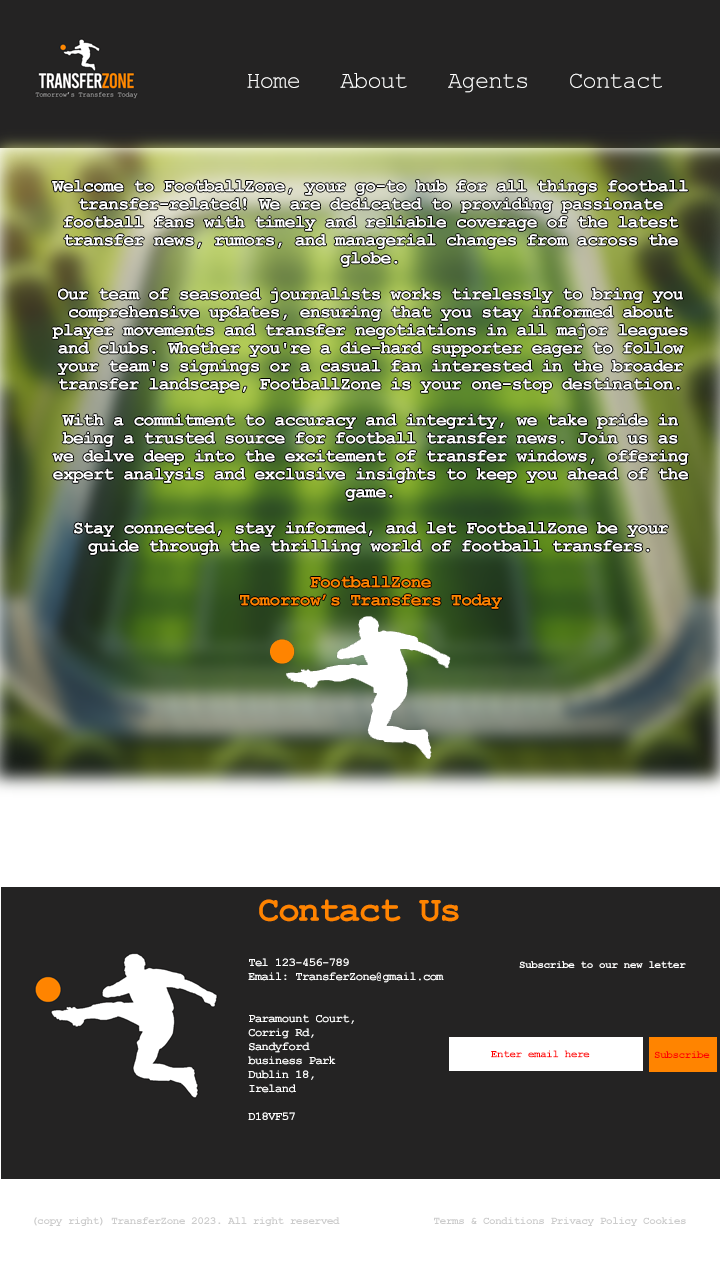
<style>
.page{position:relative;width:720px;height:1280px;background:#242323}
.page>*{position:absolute;margin:0}
.t1{font:18px/18px "CourierNewPS-BoldMT";letter-spacing:-0.04em;color:#ffffff}
.t2{font:18px/18px "CourierNewPS-BoldMT";letter-spacing:-0.04em;color:#ff8400}
</style>
<div class="page">
<p class="t1" style="left:52px;top:180px;width:637px;height:429px;text-align:center">Welcome to FootballZone, your go-to hub for all things football transfer-related! We are dedicated to providing passionate football fans with timely and reliable coverage of the latest transfer news, rumors, and managerial changes from across the globe.<br><br>Our team of seasoned journalists works tirelessly to bring you comprehensive updates, ensuring that you stay informed about player movements and transfer negotiations in all major leagues and clubs. Whether you're a die-hard supporter eager to follow your team's signings or a casual fan interested in the broader transfer landscape, FootballZone is your one-stop destination.<br><br>With a commitment to accuracy and integrity, we take pride in being a trusted source for football transfer news. Join us as we delve deep into the excitement of transfer windows, offering expert analysis and exclusive insights to keep you ahead of the game.<br><br>Stay connected, stay informed, and let FootballZone be your guide through the thrilling world of football transfers.<br><br><span class="t2">FootballZone<br>Tomorrow’s Transfers Today</span></p>
</div>
